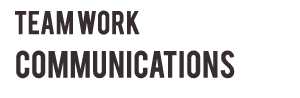
<style>
.page{position:relative;width:300px;height:98px;background:#ffffff}
.page>*{position:absolute;margin:0}
.t1{font:26px "Bebas";color:#362c32}
.t2{font:30px "Bebas";color:#362c32}
</style>
<div class="page">
<p class="t1" style="left:15px;top:10px;width:125px;height:25px">Team Work</p>
<p class="t2" style="left:16px;top:50px;width:219px;height:29px">Communications</p>
</div>
